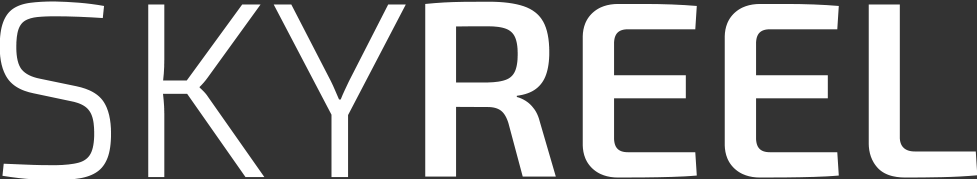
<style>
.page{position:relative;width:977px;height:179px;background:#333333}
.page>*{position:absolute;margin:0}
.t1{font:250px "Exo2-Light";color:#ffffff;text-transform:uppercase}
.t2{font:250px "Exo2-SemiBold";color:#ffffff;text-transform:uppercase}
</style>
<div class="page">
<p class="t1" style="left:0px;top:1px;width:406px;height:179px">Sky</p>
<p class="t2" style="left:425px;top:1px;width:552px;height:177px">reel</p>
</div>
